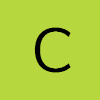
<style>
.page{position:relative;width:100px;height:100px;background:#b7d73e}
.page>*{position:absolute;margin:0}
.t1{font:62.5px "Muli-Regular";color:#000000}
</style>
<div class="page">
<p class="t1" style="left:34px;top:27px;width:37px;height:46px">C</p>
</div>
